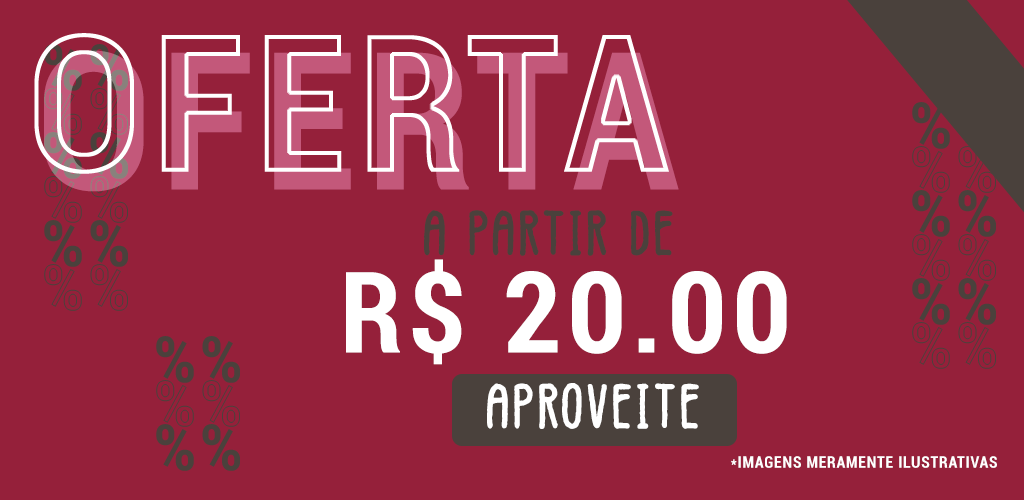
<style>
.page{position:relative;width:1024px;height:500px;background:#95203a}
.page>*{position:absolute;margin:0}
.t1{font:192px "Roboto-BoldCondensed";letter-spacing:0.05em;color:#c3587a}
.t2{font:64px "Vintages";letter-spacing:0.05em;color:#4a413c}
.t3{font:112.7px "Roboto-BoldCondensed";letter-spacing:0.05em;color:#ffffff}
.t4{font:64px "Vintages";letter-spacing:0.05em;color:#ffffff}
.t5{font:16px "Roboto-BoldCondensed";letter-spacing:0.05em;color:#ffffff}
</style>
<div class="page">
<p class="t1" style="left:44px;top:50px;width:635px;height:142px">OFERTA</p>
<p class="t2" style="left:424px;top:210px;width:249px;height:46px">a partir de</p>
<p class="t3" style="left:346px;top:259px;width:441px;height:106px">R$ 20.00</p>
<p class="t4" style="left:487px;top:383px;width:212px;height:46px">APROVEITE</p>
<p class="t5" style="left:731px;top:456px;width:266px;height:12px">*IMAGENS MERAMENTE ILUSTRATIVAS</p>
</div>
